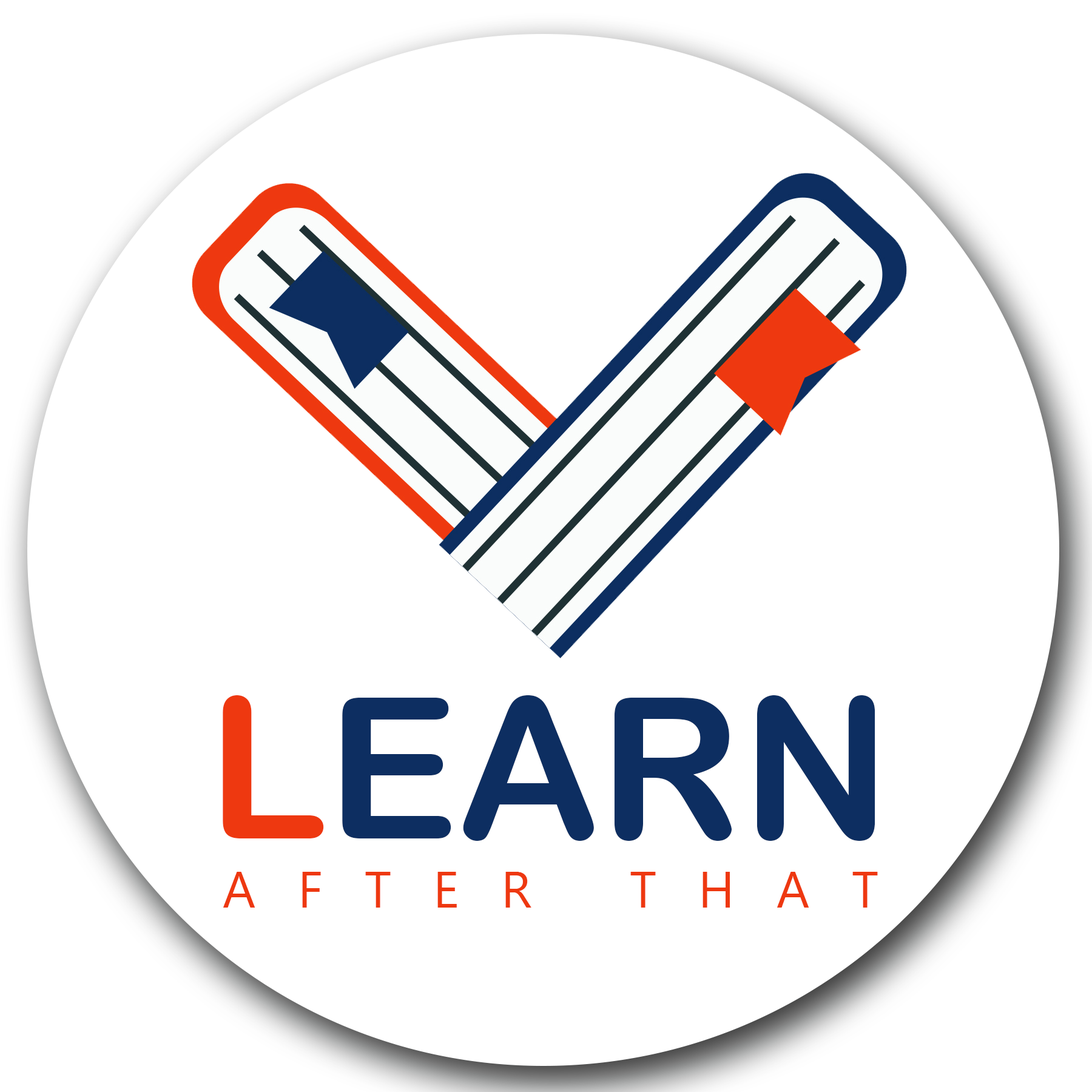
<style>
.page{position:relative;width:1092px;height:1092px;background:#ffffff}
.page>*{position:absolute;margin:0}
.t1{font:196.7px "ArialRoundedMTBold";color:#0d2e61}
.t2{font:196.7px "ArialRoundedMTBold";color:#ee3810}
.t3{font:51.2px "MicrosoftNewTaiLue";letter-spacing:0.82em;color:#ee3810}
</style>
<div class="page">
<p class="t1" style="left:223px;top:695px;width:652px;height:146px"><span class="t2">L</span>EARN</p>
<p class="t3" style="left:223px;top:872px;width:655px;height:36px">AFTER THAT</p>
</div>
